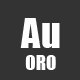
<style>
.page{position:relative;width:80px;height:80px;background:#333333}
.page>*{position:absolute;margin:0}
.t1{font:38.4px "Impact";color:#fffefe}
.t2{font:19.2px "Impact";color:#ffffff}
</style>
<div class="page">
<p class="t1" style="left:20px;top:18px;width:40px;height:30px">Au</p>
<p class="t2" style="left:25px;top:55px;width:31px;height:15px">ORO</p>
</div>
